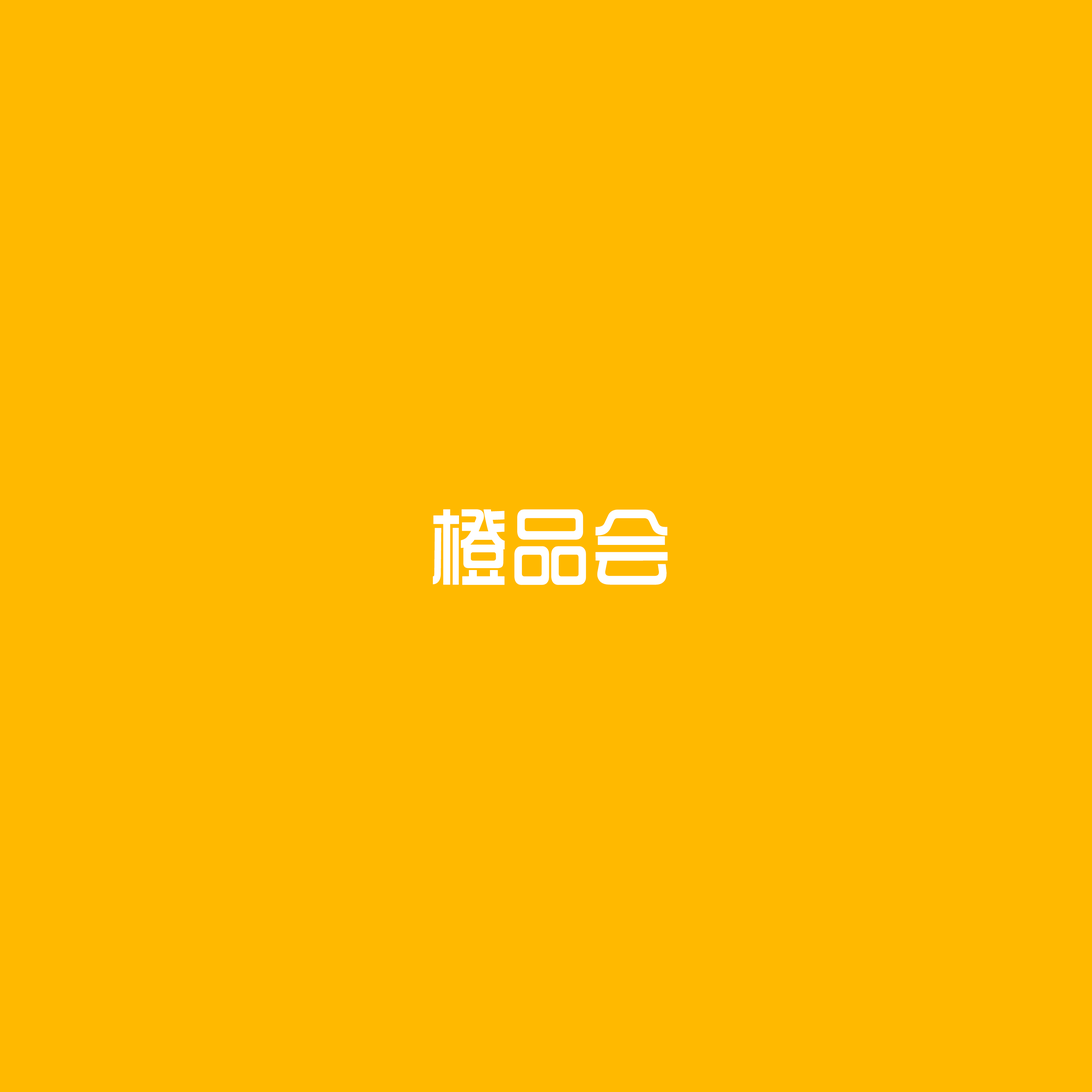
<style>
.page{position:relative;width:1092px;height:1092px;background:#ffb900}
.page>*{position:absolute;margin:0}
.t1{font:90.6px "TRENDS";color:#ffffff;font-weight:bold;scale:0.87 1}
</style>
<div class="page">
<p class="t1" style="left:433px;top:509px;width:235px;height:76px">橙品会</p>
</div>
